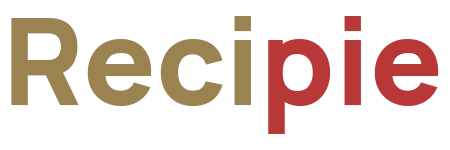
<style>
.page{position:relative;width:450px;height:150px;background:#ffffff}
.page>*{position:absolute;margin:0}
.t1{font:120px "Manrope-ExtraBold";color:#9b8251}
.t2{font:120px "Manrope-ExtraBold";color:#b83838}
</style>
<div class="page">
<p class="t1" style="left:11px;top:16px;width:428px;height:118px">Reci<span class="t2">pie</span></p>
</div>
